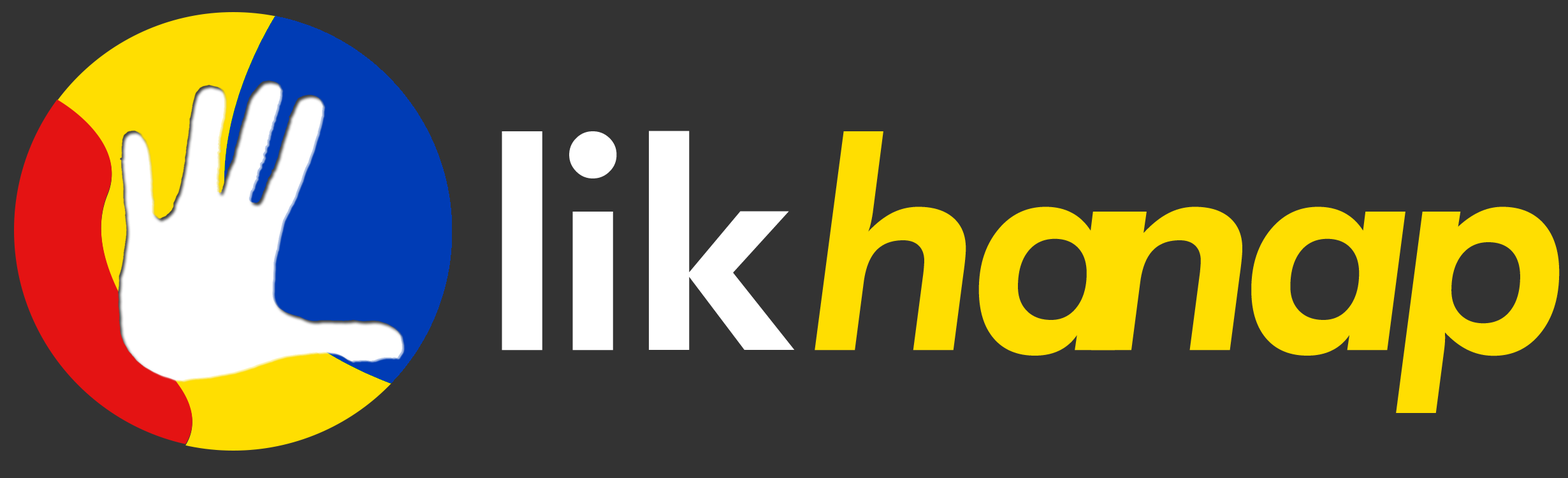
<style>
.page{position:relative;width:1568px;height:478px;background:#333333}
.page>*{position:absolute;margin:0}
.t1{font:288.9px "FuturaBT-Heavy";letter-spacing:-0.04em;color:#ffffff}
.t2{font:288.9px "FuturaBT-HeavyItalic";letter-spacing:-0.04em;color:#ffde01}
.t3{font:289.1px "FuturaBT-Heavy";letter-spacing:-0.04em;color:#ffffff}
.t4{font:288.9px "FuturaBT-HeavyItalic";letter-spacing:-0.04em;color:#ffffff}
</style>
<div class="page">
<p class="t1" style="left:502px;top:131px;width:740px;height:220px">li      <span class="t2">n</span></p>
<p class="t3" style="left:649px;top:131px;width:146px;height:219px">k</p>
<p class="t2" style="left:815px;top:131px;width:318px;height:225px">ha</p>
<p class="t2" style="left:1251px;top:207px;width:154px;height:149px"><span class="t4">        </span>  a</p>
<p class="t2" style="left:1396px;top:207px;width:164px;height:206px"><span class="t4">         </span>   p</p>
</div>
